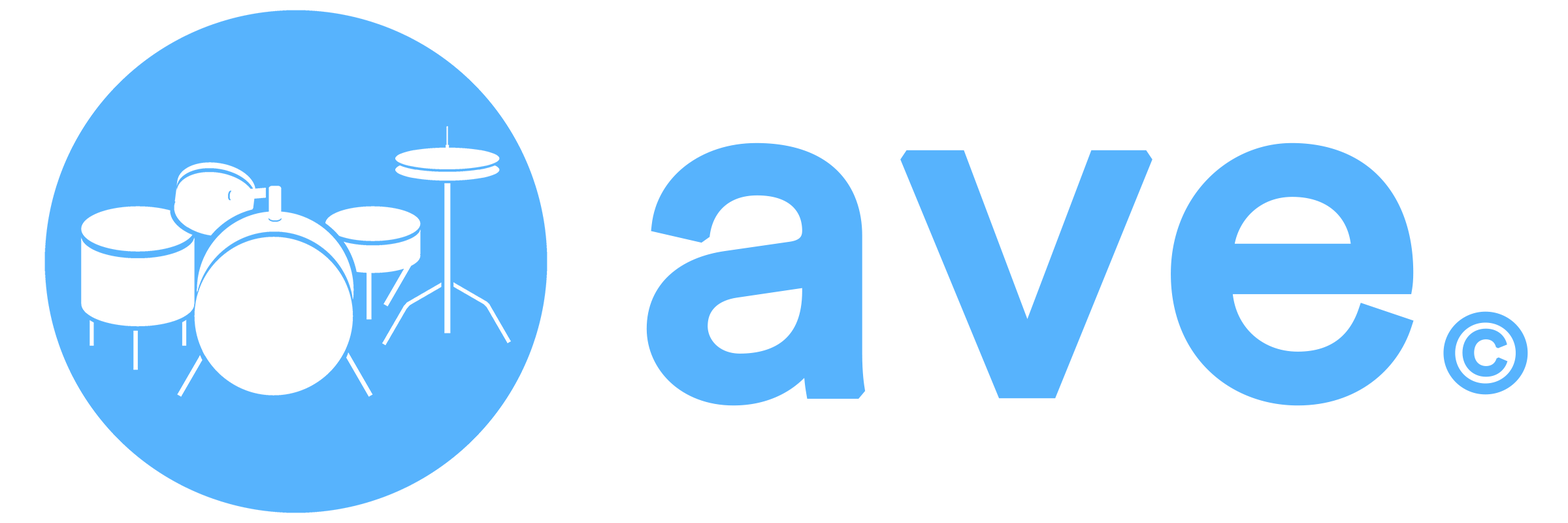
<style>
.page{position:relative;width:1568px;height:523px;background:#ffffff}
.page>*{position:absolute;margin:0}
.t1{font:487.3px "CircularStd-Book";color:#57b3fd;font-weight:bold}
.t2{font:108.9px "CircularStd-Book";color:#57b3fd;font-weight:bold}
</style>
<div class="page">
<p class="t1" style="left:646px;top:142px;width:768px;height:264px">ave</p>
<p class="t2" style="left:1443px;top:311px;width:85px;height:84px">©</p>
</div>
